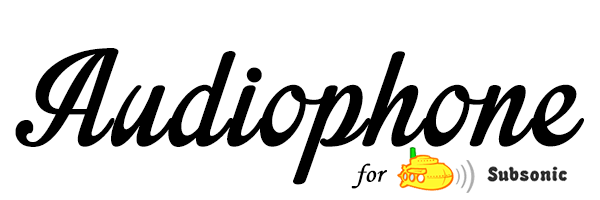
<style>
.page{position:relative;width:600px;height:200px;background:#ffffff}
.page>*{position:absolute;margin:0}
.t1{font:184px "ImpregnablePersonalUseOnly";letter-spacing:-0.005em;color:#000000;font-weight:bold}
.t2{font:45px "MonotypeCorsiva";letter-spacing:-0.005em;color:#000000;font-weight:bold}
</style>
<div class="page">
<p class="t1" style="left:15px;top:48px;width:569px;height:137px">Audiophone</p>
<p class="t2" style="left:351px;top:163px;width:36px;height:26px">for</p>
</div>
